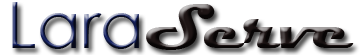
<style>
.page{position:relative;width:360px;height:55px;background:#ffffff}
.page>*{position:absolute;margin:0}
.t1{font:64px "Magneto-Bold"}
.t2{font:64px "CenturyGothic"}
</style>
<div class="page">
<p class="t1" style="left:12px;top:2px;width:342px;height:48px"><span class="t2">Lara</span>Serve</p>
</div>
